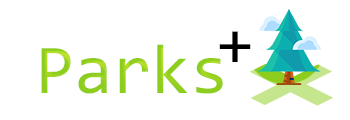
<style>
.page{position:relative;width:350px;height:120px;background:#ffffff}
.page>*{position:absolute;margin:0}
.t1{font:65px "Consolas";color:#000000}
.t2{font:70px "Consolas";color:#8dcd1d}
.t3{font:158.1px "Consolas-Bold";color:#c6e68e}
</style>
<div class="page">
<p class="t1" style="left:219px;top:31px;width:32px;height:31px">+</p>
<p class="t2" style="left:41px;top:44px;width:182px;height:50px">Parks</p>
<p class="t3" style="left:249px;top:63px;width:84px;height:43px;rotate:-27deg">+</p>
</div>
